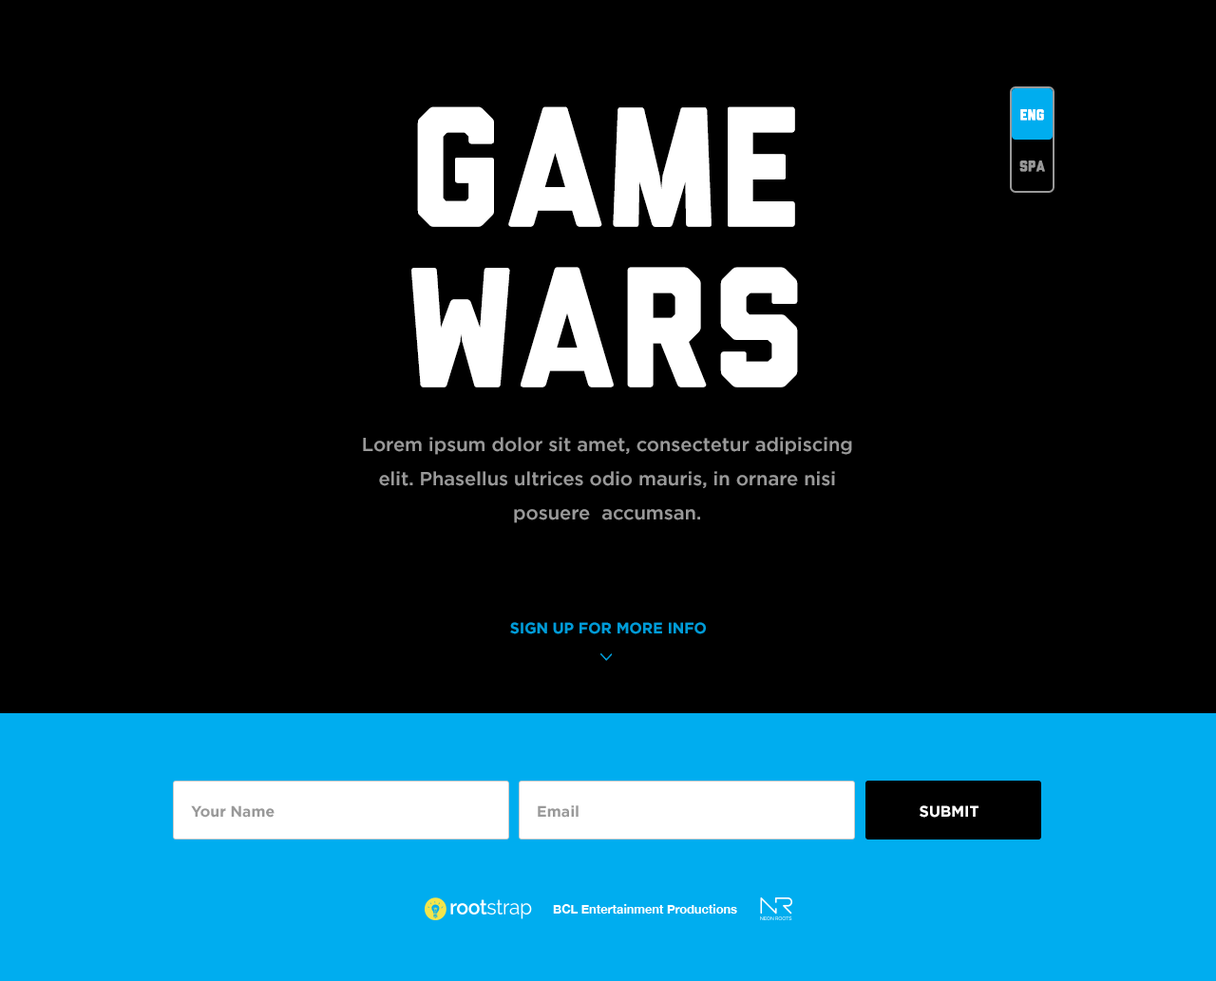
<style>
.page{position:relative;width:1216px;height:981px;background:#000000}
.page>*{position:absolute;margin:0}
.t1{font:170.9px/58.9px "Liberator";letter-spacing:-0.005em;color:#ffffff;text-transform:uppercase}
.t2{font:15.2px "Liberator";letter-spacing:-0.005em;color:#ffffff;text-transform:uppercase}
.t3{font:15.2px "Liberator";letter-spacing:-0.005em;color:#999999;text-transform:uppercase}
.t4{font:19px/33.8px "Gotham-Medium";color:#999999}
.t5{font:15.2px "Gotham-Bold";color:#00adef;text-transform:uppercase}
.t6{font:15.2px "Gotham-Bold";color:#999999}
.t7{font:15.2px "Gotham-Bold";color:#ffffff;text-transform:uppercase}
</style>
<div class="page">
<p class="t1" style="left:411px;top:106px;width:387px;height:281px;text-align:center">GAME<br>WARS</p>
<p class="t2" style="left:1020px;top:109px;width:24px;height:12px">ENG</p>
<p class="t3" style="left:1019px;top:160px;width:26px;height:12px">Spa</p>
<p class="t4" style="left:363px;top:437px;width:489px;height:86px;text-align:center">Lorem ipsum dolor sit amet, consectetur adipiscing<br>elit. Phasellus ultrices odio mauris, in ornare nisi<br>posuere  accumsan.</p>
<p class="t5" style="left:510px;top:622px;width:196px;height:12px">Sign up for more info</p>
<p class="t6" style="left:191px;top:805px;width:83px;height:13px">Your Name</p>
<p class="t6" style="left:537px;top:805px;width:41px;height:13px">Email</p>
<p class="t7" style="left:919px;top:805px;width:59px;height:13px">submit</p>
</div>
